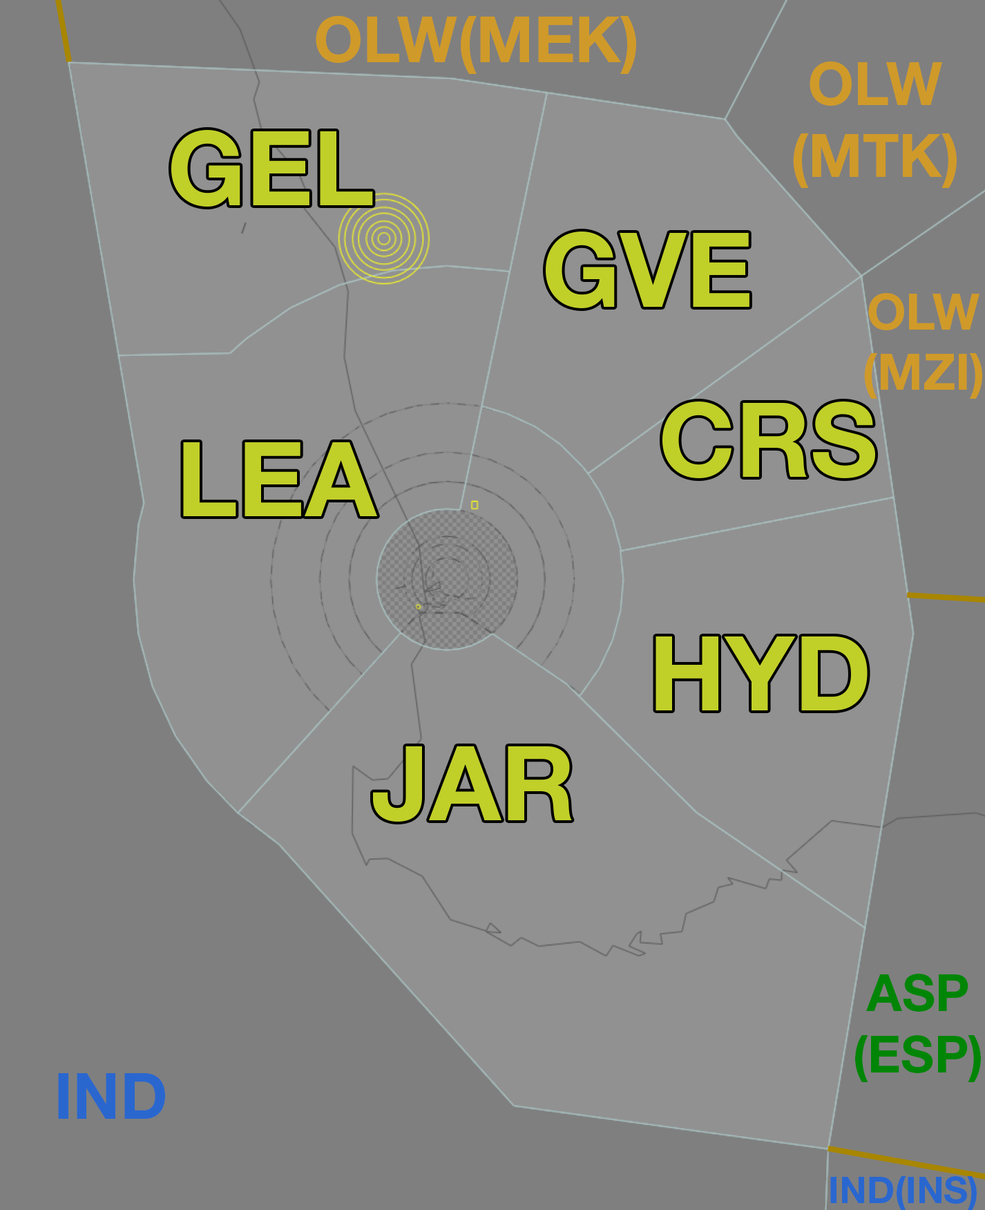
<style>
.page{position:relative;width:985px;height:1210px;background:#919191}
.page>*{position:absolute;margin:0}
.t1{font:63.6px "HelveticaNeueLTStd-Bd";color:#cf9a29}
.t2{font:59.8px "HelveticaNeueLTStd-Bd";color:#cf9a29}
.t3{font:103.9px "HelveticaNeueLTStd-Bd";color:#c1cf29}
.t4{font:50.2px "HelveticaNeueLTStd-Bd";color:#cf9a29}
.t5{font:51.4px "HelveticaNeueLTStd-Bd";color:#008506}
.t6{font:63.9px "HelveticaNeueLTStd-Bd";color:#2967cf}
.t7{font:37.2px "HelveticaNeueLTStd-Bd";color:#2967cf}
</style>
<div class="page">
<p class="t1" style="left:316px;top:16px;width:320px;height:58px">OLW(MEK)</p>
<p class="t2" style="left:793px;top:62px;width:164px;height:126px;text-align:center">OLW<br>(MTK)</p>
<p class="t3" style="left:171px;top:130px;width:202px;height:77px">GEL</p>
<p class="t3" style="left:546px;top:232px;width:204px;height:76px">GVE</p>
<p class="t4" style="left:865px;top:293px;width:118px;height:106px;text-align:center">OLW<br>(MZI)</p>
<p class="t3" style="left:663px;top:402px;width:213px;height:76px">CRS</p>
<p class="t3" style="left:183px;top:442px;width:194px;height:74px">LEA</p>
<p class="t3" style="left:656px;top:636px;width:212px;height:74px">HYD</p>
<p class="t3" style="left:373px;top:746px;width:199px;height:76px">JAR</p>
<p class="t5" style="left:856px;top:974px;width:125px;height:108px;text-align:center">ASP<br>(ESP)</p>
<p class="t6" style="left:58px;top:1073px;width:107px;height:46px">IND</p>
<p class="t7" style="left:831px;top:1176px;width:146px;height:35px">IND(INS)</p>
</div>
